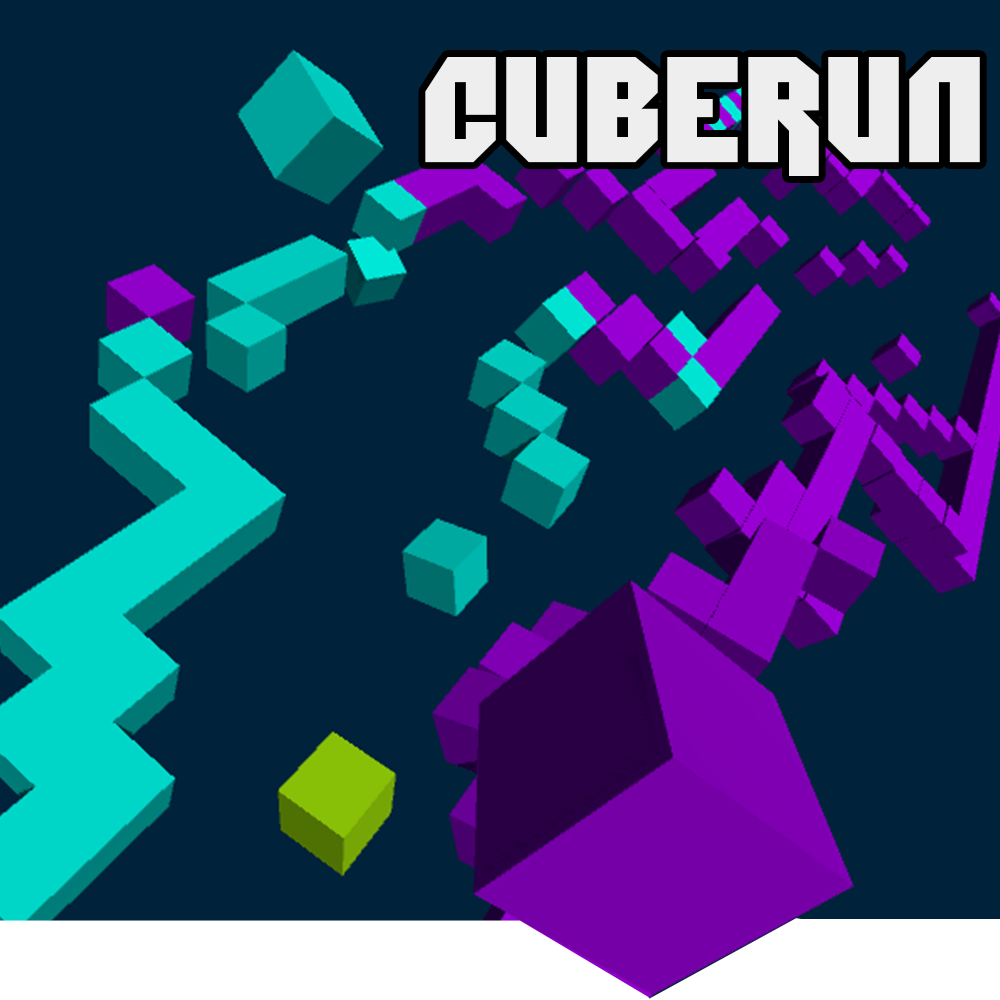
<style>
.page{position:relative;width:1000px;height:1000px;background:#00223a}
.page>*{position:absolute;margin:0}
.t1{font:149.1px "Dimitri";color:#eeeeee}
</style>
<div class="page">
<p class="t1" style="left:425px;top:57px;width:555px;height:119px">CUBERUN</p>
</div>
